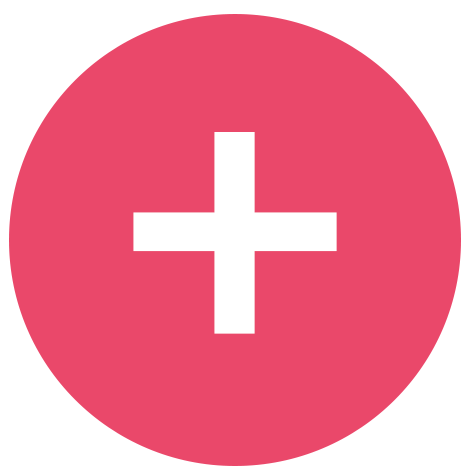
<style>
.page{position:relative;width:469px;height:467px;background:#ea486a}
.page>*{position:absolute;margin:0}
.t1{font:500px "NexaRegular";color:#ffffff}
</style>
<div class="page">
<p class="t1" style="left:133px;top:132px;width:204px;height:202px">+</p>
</div>
